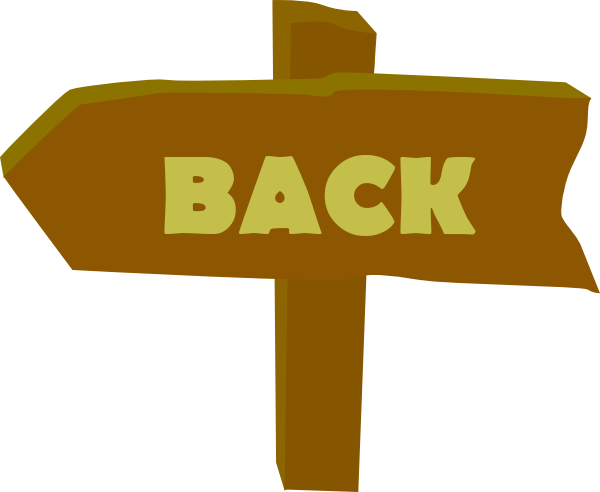
<style>
.page{position:relative;width:600px;height:492px;background:#ffffff}
.page>*{position:absolute;margin:0}
.t1{font:113.4px "BerlinSansFB-Bold";color:#c4be4b}
</style>
<div class="page">
<p class="t1" style="left:164px;top:155px;width:312px;height:81px">BACK</p>
</div>
